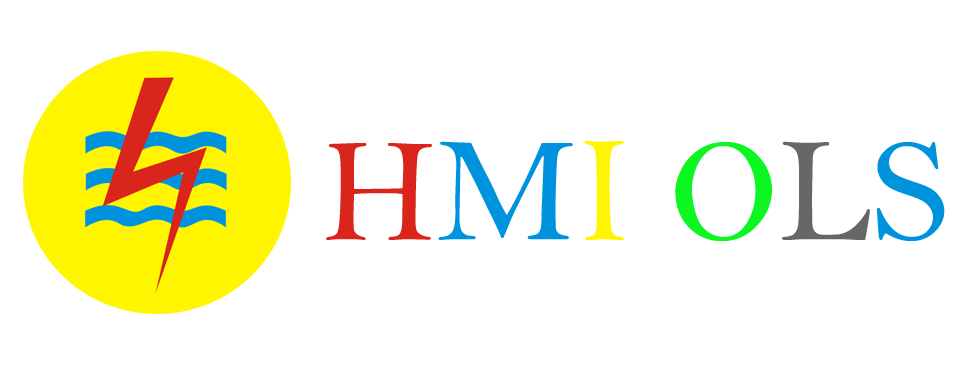
<style>
.page{position:relative;width:960px;height:384px;background:#ffffff}
.page>*{position:absolute;margin:0}
.t1{font:150.2px "BellMT";color:#da251d}
.t2{font:150.2px "BellMT";color:#0093dd}
.t3{font:150.2px "BellMT";color:#fff500}
.t4{font:150.2px "BellMT";color:#0cf622}
.t5{font:150.2px "BellMT";color:#696666}
</style>
<div class="page">
<p class="t1" style="left:326px;top:141px;width:619px;height:100px">H<span class="t2">M</span><span class="t3">I </span><span class="t4">O</span><span class="t5">L</span><span class="t2">S</span></p>
</div>
